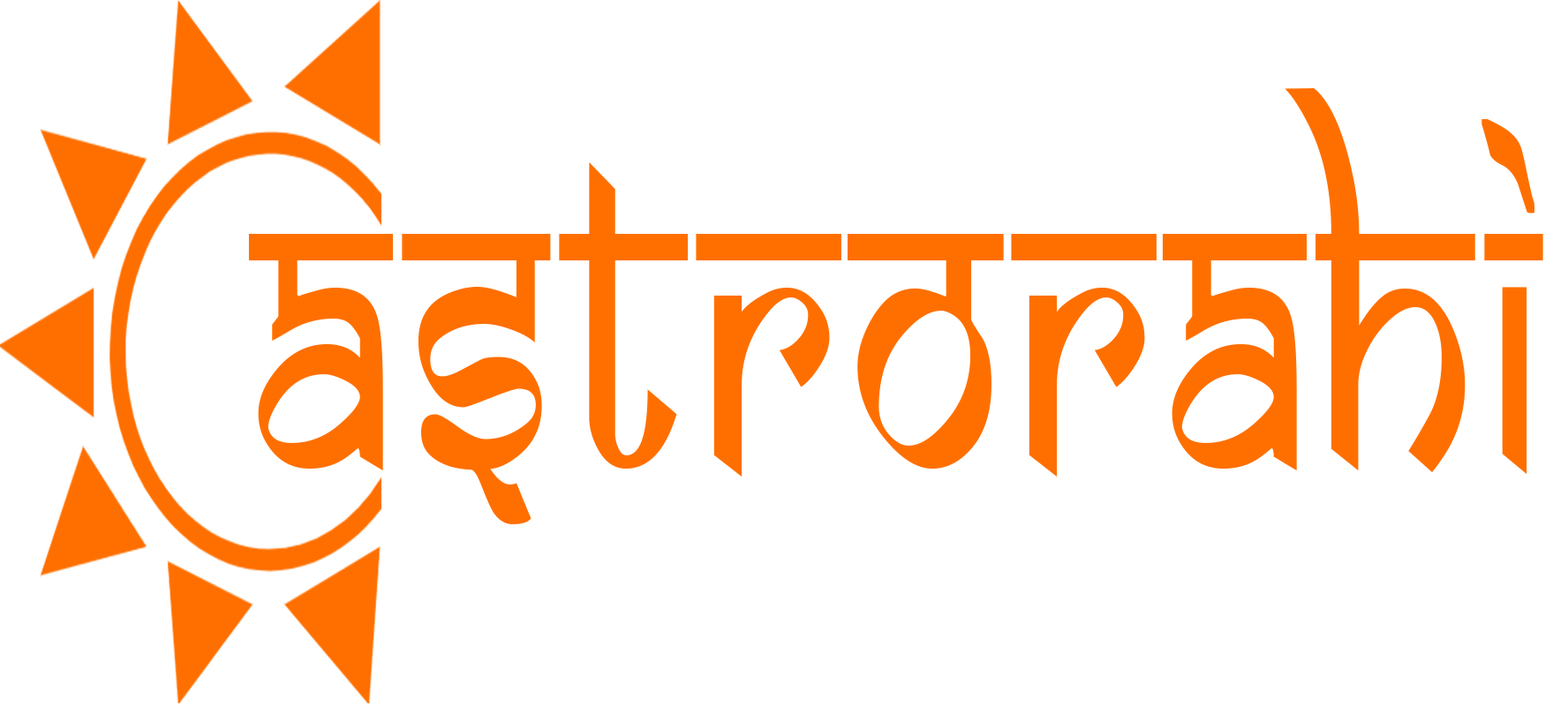
<style>
.page{position:relative;width:1568px;height:706px;background:#ffffff}
.page>*{position:absolute;margin:0}
.t1{font:441.4px "SamarkanNormal";letter-spacing:0.04em;color:#ff6f00;scale:0.67 1}
</style>
<div class="page">
<p class="t1" style="left:248px;top:88px;width:1295px;height:436px">astrorahi</p>
</div>
